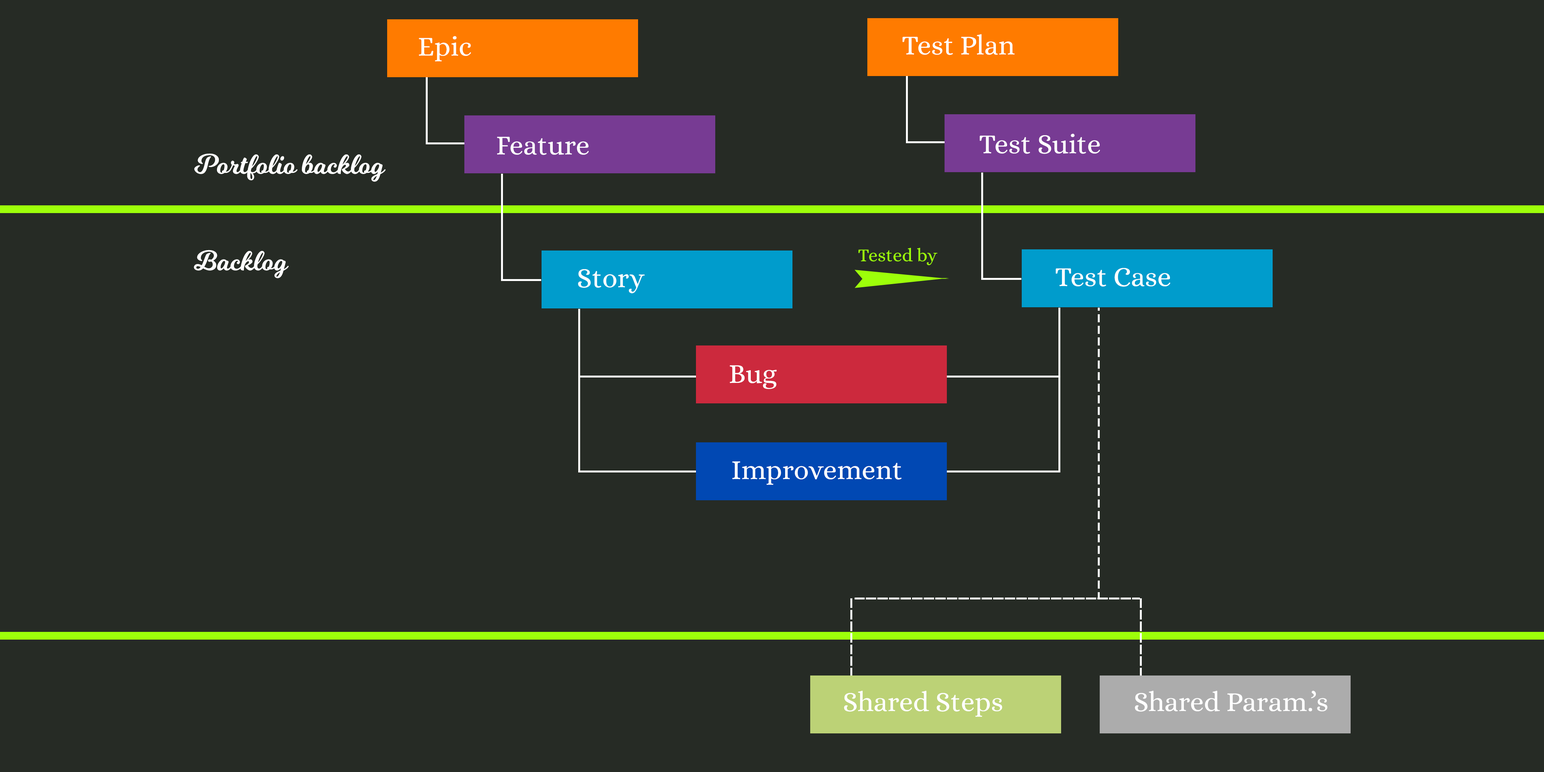
<style>
.page{position:relative;width:1544px;height:772px;background:#262b25}
.page>*{position:absolute;margin:0}
.t1{font:27.8px "Alice-Regular";color:#ffffff}
.t2{font:27.8px "Milkshake";color:#ffffff}
.t3{font:18.5px "Alice-Regular";color:#9dff0a}
</style>
<div class="page">
<p class="t1" style="left:419px;top:36px;width:52px;height:25px">Epic</p>
<p class="t1" style="left:903px;top:34px;width:112px;height:21px">Test Plan</p>
<p class="t1" style="left:497px;top:137px;width:92px;height:18px">Feature</p>
<p class="t1" style="left:980px;top:134px;width:120px;height:20px">Test Suite</p>
<p class="t2" style="left:194px;top:153px;width:192px;height:29px">Portfolio backlog</p>
<p class="t2" style="left:194px;top:250px;width:95px;height:28px">Backlog</p>
<p class="t3" style="left:859px;top:248px;width:79px;height:17px">Tested by</p>
<p class="t1" style="left:578px;top:269px;width:67px;height:24px">Story</p>
<p class="t1" style="left:1056px;top:268px;width:115px;height:19px">Test Case</p>
<p class="t1" style="left:730px;top:365px;width:47px;height:24px">Bug</p>
<p class="t1" style="left:732px;top:461px;width:170px;height:24px">Improvement</p>
<p class="t1" style="left:844px;top:691px;width:159px;height:26px">Shared Steps</p>
<p class="t1" style="left:1135px;top:691px;width:193px;height:21px">Shared Param.’s</p>
</div>
